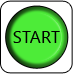
<style>
.page{position:relative;width:73px;height:74px;background:#ffffff}
.page>*{position:absolute;margin:0}
.t1{font:17.3px "SegoeUI";color:#000000}
</style>
<div class="page">
<p class="t1" style="left:13px;top:31px;width:47px;height:12px">START</p>
</div>
